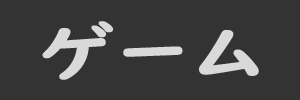
<style>
.page{position:relative;width:300px;height:100px;background:#333333}
.page>*{position:absolute;margin:0}
.t1{font:63.8px "UDDigiKyokashoNK-B";letter-spacing:0.05em;color:#d9d9d9;font-weight:bold;scale:1.18 1}
</style>
<div class="page">
<p class="t1" style="left:42px;top:21px;width:217px;height:59px">ゲーム</p>
</div>
